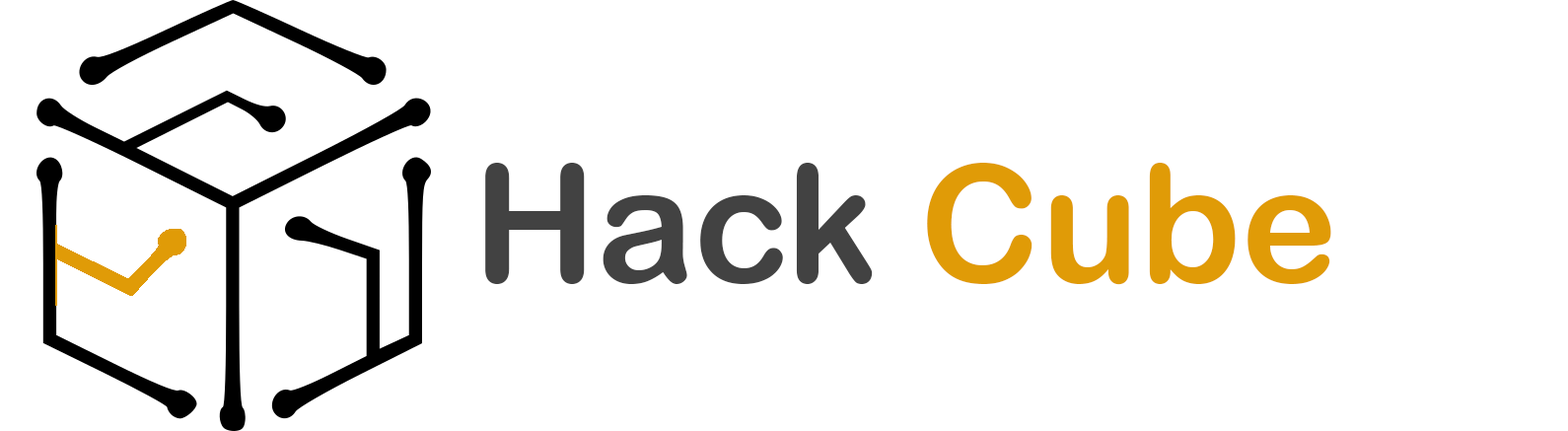
<style>
.page{position:relative;width:1568px;height:431px;background:#ffffff}
.page>*{position:absolute;margin:0}
.t1{font:11.8px "ArialRoundedMTBold";color:#424242}
.t2{font:11.8px "ArialRoundedMTBold";color:#e09b07}
</style>
<div class="page">
<p class="t1" style="left:485px;top:163px;width:846px;height:122px">Hack <span class="t2">Cube</span></p>
</div>
